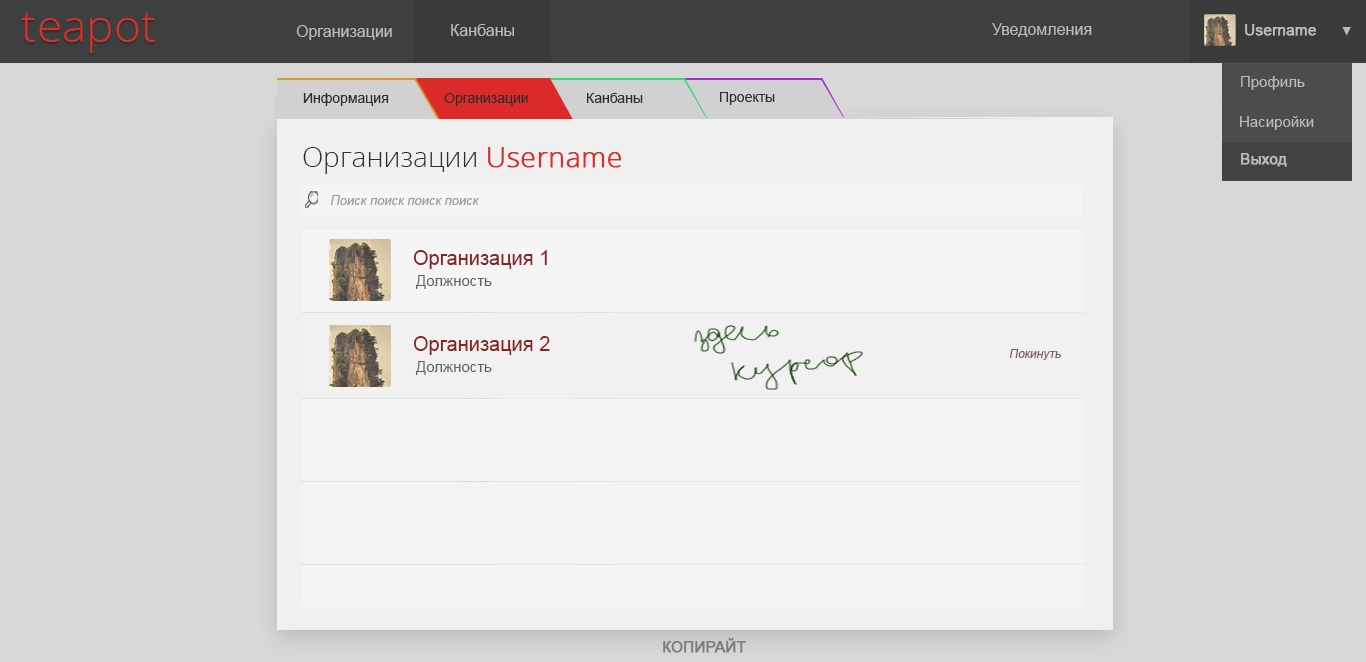
<style>
.page{position:relative;width:1366px;height:662px;background:#d9d8d9}
.page>*{position:absolute;margin:0}
.t1{font:46px "OpenSans-Light";color:#d4312c}
.t2{font:16px "ArialMT";color:#bdbbbb}
.t3{font:15px "ArialMT";color:#bdbbbb;font-weight:bold}
.t4{font:12.3px "ArialMT";color:#bdbbbb}
.t5{font:15px "ArialMT";color:#bdbbbb}
.t6{font:14px "ArialMT";color:#2e2e2e}
.t7{font:28px "OpenSans-Light";color:#2e2e2e}
.t8{font:28px "OpenSans-Light";color:#d4312c;font-weight:bold}
.t9{font:13px "ArialMT";color:#9c9c9c;font-style:italic}
.t10{font:20px "ArialMT";color:#862626}
.t11{font:15px "ArialMT";color:#626262}
.t12{font:12px "ArialMT";color:#775c5c;font-style:italic}
.t13{font:15px "ArialMT";color:#7b7a7a;font-weight:bold}
</style>
<div class="page">
<p class="t1" style="left:21px;top:12px;width:135px;height:41px">teapot</p>
<p class="t2" style="left:296px;top:25px;width:96px;height:15px">Организации</p>
<p class="t2" style="left:451px;top:24px;width:63px;height:12px">Канбаны</p>
<p class="t2" style="left:992px;top:23px;width:100px;height:14px">Уведомления</p>
<p class="t3" style="left:1245px;top:24px;width:71px;height:12px">Username</p>
<p class="t4" style="left:1342px;top:27px;width:9px;height:8px">▼</p>
<p class="t5" style="left:1241px;top:76px;width:64px;height:14px">Профиль</p>
<p class="t6" style="left:303px;top:93px;width:86px;height:13px">Информация</p>
<p class="t6" style="left:444px;top:93px;width:84px;height:13px">Организации</p>
<p class="t6" style="left:587px;top:93px;width:56px;height:10px">Канбаны</p>
<p class="t6" style="left:720px;top:92px;width:55px;height:13px">Проекты</p>
<p class="t5" style="left:1240px;top:116px;width:74px;height:14px">Насиройки</p>
<p class="t7" style="left:303px;top:147px;width:319px;height:27px">Организации <span class="t8">Username</span></p>
<p class="t3" style="left:1241px;top:153px;width:46px;height:14px">Выход</p>
<p class="t9" style="left:331px;top:195px;width:148px;height:10px">Поиск поиск поиск поиск</p>
<p class="t10" style="left:413px;top:250px;width:134px;height:19px">Организация 1</p>
<p class="t11" style="left:415px;top:275px;width:77px;height:14px">Должность</p>
<p class="t10" style="left:413px;top:336px;width:137px;height:19px">Организация 2</p>
<p class="t12" style="left:1009px;top:349px;width:52px;height:11px">Покинуть</p>
<p class="t11" style="left:415px;top:361px;width:77px;height:14px">Должность</p>
<p class="t13" style="left:663px;top:638px;width:83px;height:15px">КОПИРАЙТ</p>
</div>
